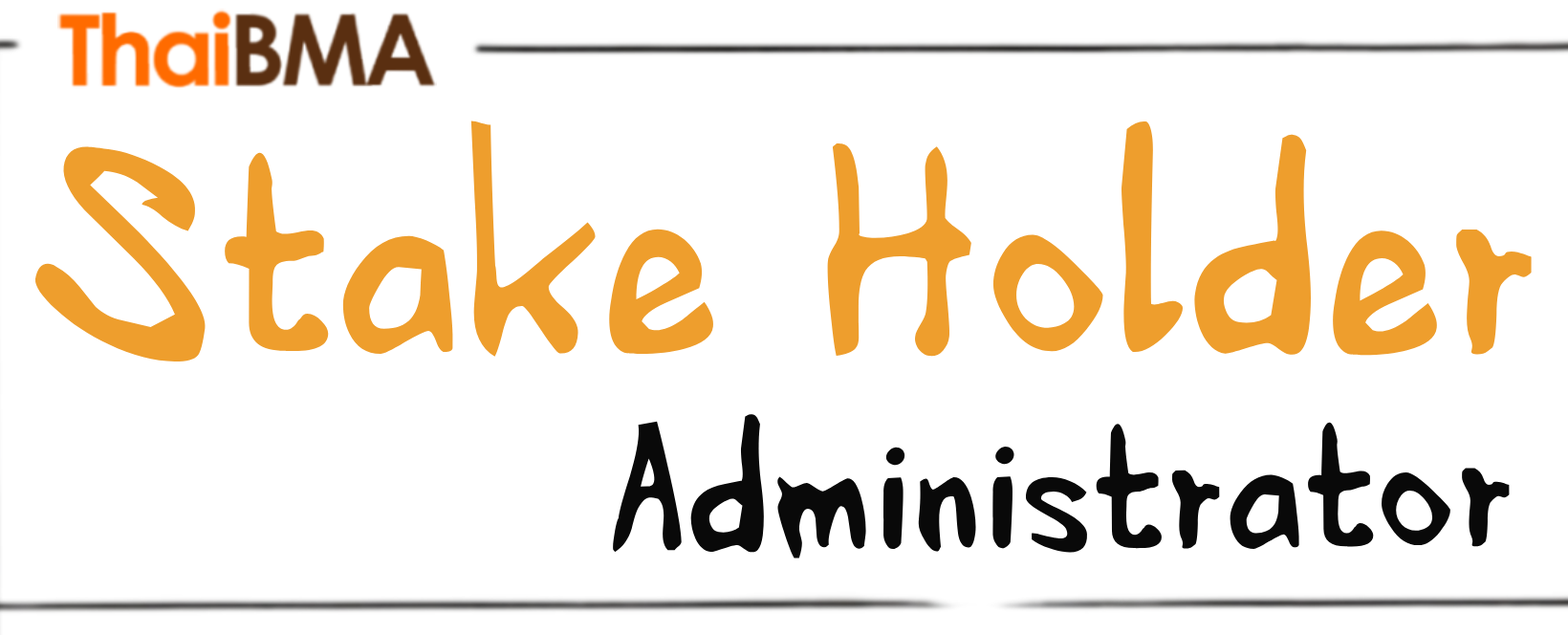
<style>
.page{position:relative;width:1568px;height:635px;background:#ffffff}
.page>*{position:absolute;margin:0}
.t1{font:303.5px "HVDEdding780-Normal";color:#ee9e2d}
.t2{font:190.2px "HVDEdding780-Normal";color:#090909}
</style>
<div class="page">
<p class="t1" style="left:35px;top:120px;width:1497px;height:241px">Stake Holder</p>
<p class="t2" style="left:613px;top:413px;width:897px;height:145px">Administrator</p>
</div>
